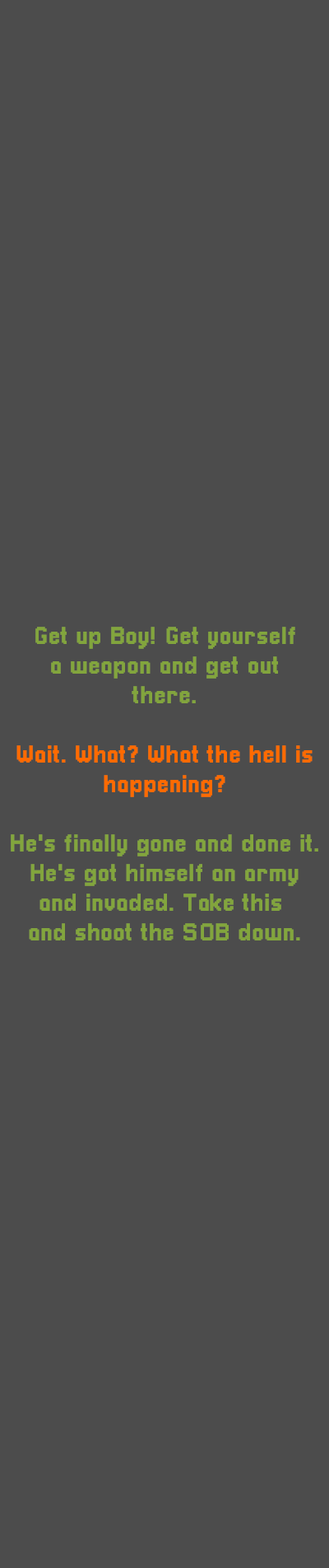
<style>
.page{position:relative;width:329px;height:1568px;background:#4c4c4c}
.page>*{position:absolute;margin:0}
.t1{font:24.7px "Pixellari";color:#82a53d}
.t2{font:24.7px "Pixellari";color:#ff6a00}
</style>
<div class="page">
<p class="t1" style="left:11px;top:627px;width:308px;height:313px;text-align:center">Get up Boy! Get yourself<br>a weapon and get out<br>there.<br><span class="t2"><br>Wait. What? What the hell is<br>happening?<br><br></span>He's finally gone and done it.<br>He's got himself an army<br>and invaded. Take this <br>and shoot the SOB down.</p>
</div>
